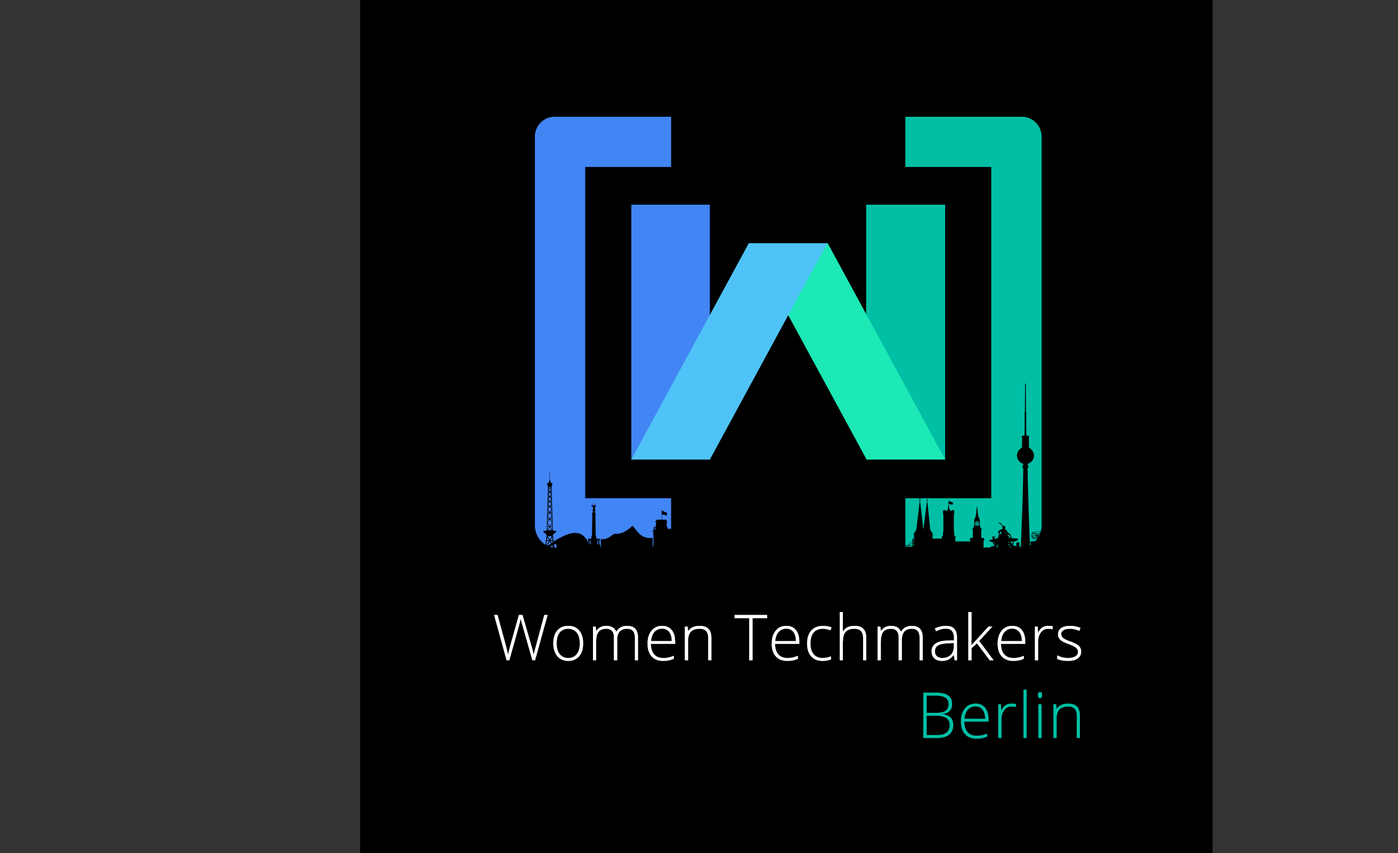
<style>
.page{position:relative;width:1398px;height:853px;background:#000000}
.page>*{position:absolute;margin:0}
.t1{font:63.3px "OpenSans-Light";letter-spacing:0.01em;color:#ffffff}
.t2{font:63.3px "OpenSans-Light";letter-spacing:0.01em;color:#00bfa5}
</style>
<div class="page">
<p class="t1" style="left:494px;top:612px;width:588px;height:49px">Women Techmakers</p>
<p class="t2" style="left:924px;top:689px;width:156px;height:50px">Berlin</p>
</div>
